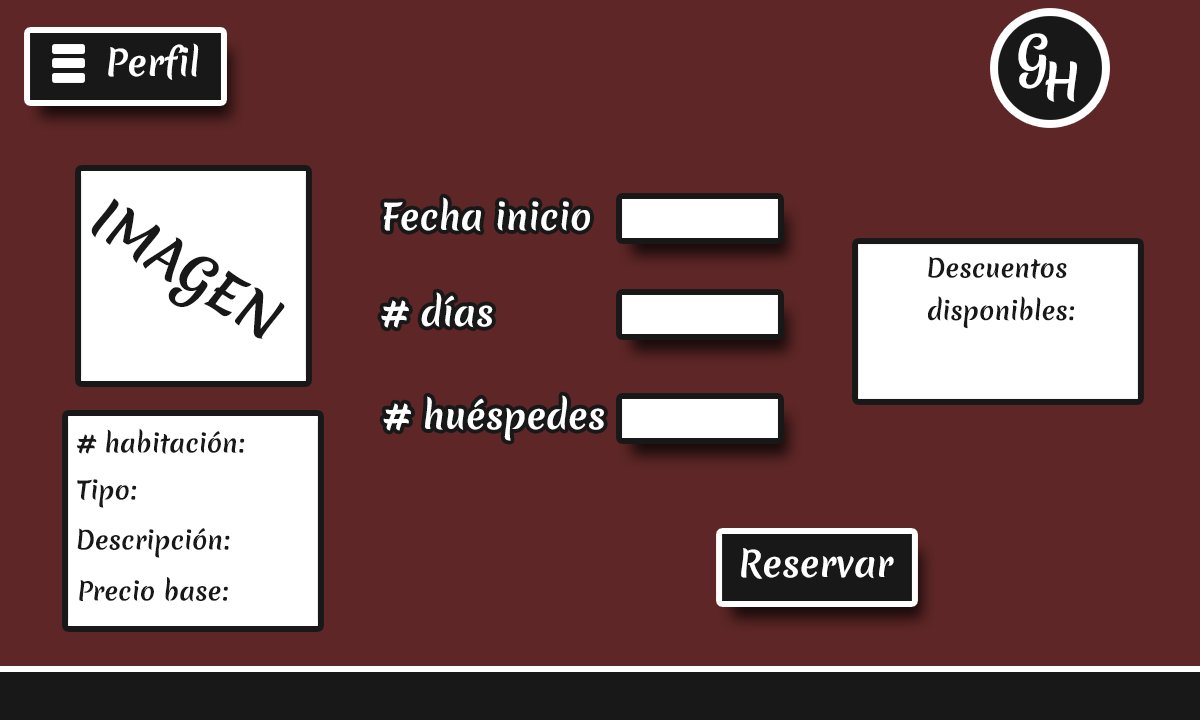
<style>
.page{position:relative;width:1200px;height:720px;background:#5e2626}
.page>*{position:absolute;margin:0}
.t1{font:48.4px "MeriendaOne-Regular";color:#ffffff}
.t2{font:35.1px "MeriendaOne-Regular";color:#ffffff}
.t3{font:51.9px "MeriendaOne-Regular";color:#181818}
.t4{font:24.6px/42.3px "MeriendaOne-Regular";color:#181818}
.t5{font:24.6px "MeriendaOne-Regular";color:#181818}
</style>
<div class="page">
<p class="t1" style="left:1018px;top:33px;width:30px;height:56px">G</p>
<p class="t2" style="left:108px;top:43px;width:91px;height:37px">Perfil</p>
<p class="t1" style="left:1045px;top:61px;width:32px;height:41px">H</p>
<p class="t3" style="left:91px;top:198px;width:194px;height:141px;rotate:32deg">IMAGEN</p>
<p class="t2" style="left:384px;top:197px;width:206px;height:35px">Fecha inicio</p>
<p class="t4" style="left:928px;top:256px;width:147px;height:73px;text-align:center">Descuentos <br>disponibles:</p>
<p class="t2" style="left:381px;top:292px;width:112px;height:36px"># días</p>
<p class="t2" style="left:383px;top:395px;width:221px;height:46px"># huéspedes</p>
<p class="t5" style="left:77px;top:428px;width:168px;height:26px"># habitación:</p>
<p class="t5" style="left:77px;top:479px;width:60px;height:29px">Tipo:</p>
<p class="t5" style="left:77px;top:528px;width:153px;height:30px">Descripción:</p>
<p class="t2" style="left:741px;top:548px;width:153px;height:31px">Reservar</p>
<p class="t5" style="left:79px;top:576px;width:149px;height:26px">Precio base:</p>
</div>
